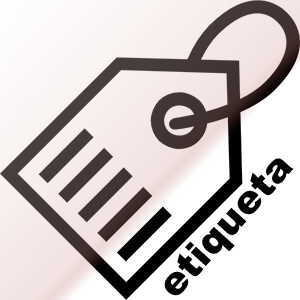
<style>
.page{position:relative;width:300px;height:300px;background:#ffffff}
.page>*{position:absolute;margin:0}
.t1{font:39.2px "Arial-Black";color:#040404}
</style>
<div class="page">
<p class="t1" style="left:164px;top:158px;width:130px;height:138px;rotate:-48deg">etiqueta</p>
</div>
